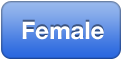
<style>
.page{position:relative;width:122px;height:60px}
.page>*{position:absolute;margin:0}
.t1{font:24px "HelveticaNeue-Bold";color:#ffffff}
</style>
<div class="page">
<p class="t1" style="left:22px;top:21px;width:82px;height:19px">Female</p>
</div>
